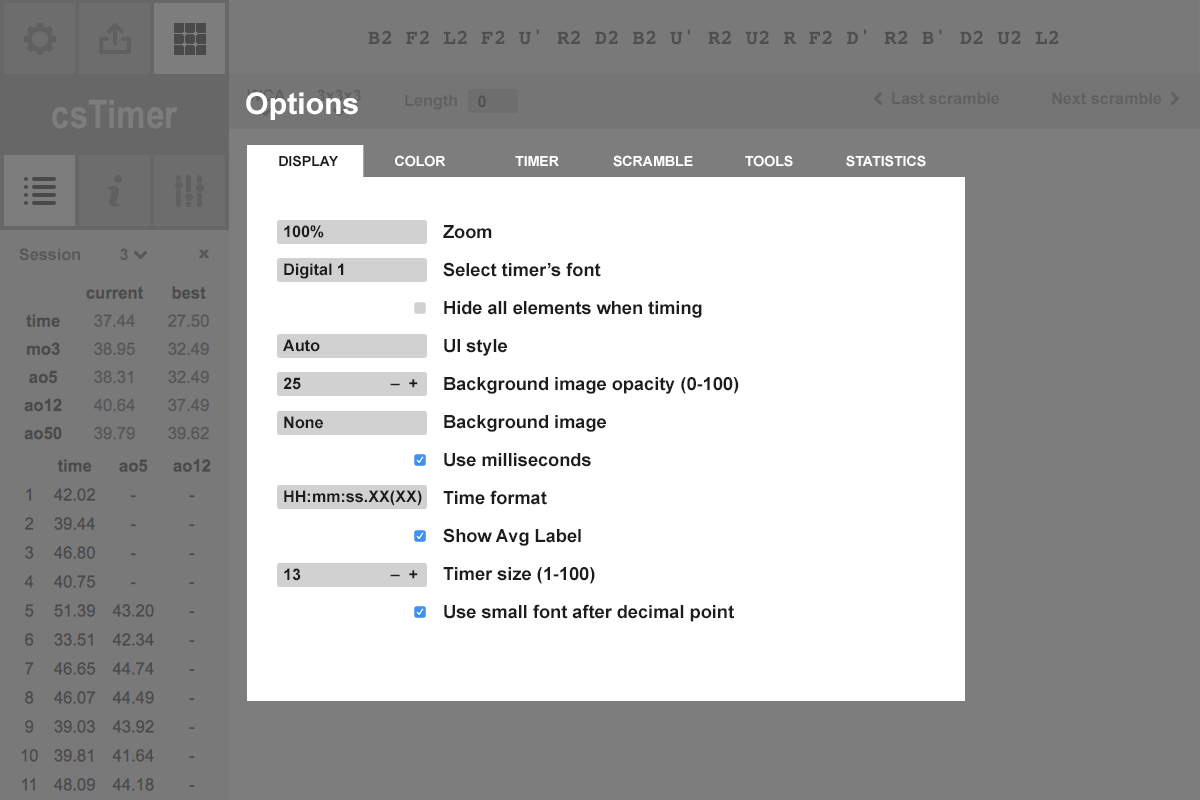
<style>
.page{position:relative;width:1200px;height:800px;background:#ffffff}
.page>*{position:absolute;margin:0}
.t1{font:21px "Courier-Bold";color:#4f4f4f}
.t2{font:39.6px "ArialNarrow-Bold";color:#7d7d7d}
.t3{font:30px "Arial-BoldMT";color:#ffffff}
.t4{font:16px "Arial-BoldMT";color:#6a6a6a}
.t5{font:16px "Arial-BoldMT";color:#4f4f4f}
.t6{font:14px "Arial-BoldMT";color:#1c1c1c}
.t7{font:14px "Arial-BoldMT";color:#ffffff}
.t8{font:16px "Arial-BoldMT";color:#1c1c1c}
.t9{font:18px/38px "Arial-BoldMT";color:#1c1c1c}
.t10{font:16px "Arial-BoldMT";color:#434343}
</style>
<div class="page">
<p class="t1" style="left:368px;top:29px;width:691px;height:16px">B2 F2 L2 F2 U' R2 D2 B2 U' R2 U2 R F2 D' R2 B' D2 U2 L2</p>
<p class="t2" style="left:52px;top:99px;width:126px;height:30px">csTimer</p>
<p class="t3" style="left:246px;top:92px;width:112px;height:28px">Options</p>
<p class="t4" style="left:405px;top:94px;width:52px;height:16px">Length</p>
<p class="t5" style="left:478px;top:95px;width:8px;height:13px">0</p>
<p class="t4" style="left:892px;top:92px;width:108px;height:13px">Last scramble</p>
<p class="t4" style="left:1052px;top:92px;width:110px;height:13px">Next scramble</p>
<p class="t6" style="left:279px;top:155px;width:59px;height:12px">DISPLAY</p>
<p class="t7" style="left:395px;top:155px;width:51px;height:12px">COLOR</p>
<p class="t7" style="left:515px;top:156px;width:44px;height:10px">TIMER</p>
<p class="t7" style="left:613px;top:155px;width:80px;height:12px">SCRAMBLE</p>
<p class="t7" style="left:745px;top:155px;width:48px;height:12px">TOOLS</p>
<p class="t7" style="left:846px;top:155px;width:80px;height:12px">STATISTICS</p>
<p class="t8" style="left:284px;top:225px;width:40px;height:13px">100%</p>
<p class="t9" style="left:443px;top:225px;width:296px;height:397px">Zoom<br>Select timer’s font<br>Hide all elements when timing<br>UI style<br>Background image opacity (0-100)<br>Background image<br>Use milliseconds<br>Time format<br>Show Avg Label<br>Timer size (1-100)<br>Use small font after decimal point</p>
<p class="t10" style="left:19px;top:248px;width:61px;height:13px">Session</p>
<p class="t10" style="left:120px;top:248px;width:8px;height:13px">3</p>
<p class="t8" style="left:284px;top:263px;width:60px;height:16px">Digital 1</p>
<p class="t8" style="left:283px;top:339px;width:37px;height:13px">Auto</p>
<p class="t8" style="left:283px;top:377px;width:135px;height:13px">25                    _  +</p>
<p class="t8" style="left:284px;top:416px;width:39px;height:13px">None</p>
<p class="t8" style="left:284px;top:490px;width:138px;height:16px">HH:mm:ss.XX(XX)</p>
<p class="t8" style="left:284px;top:568px;width:134px;height:13px">13                    _  +</p>
</div>
